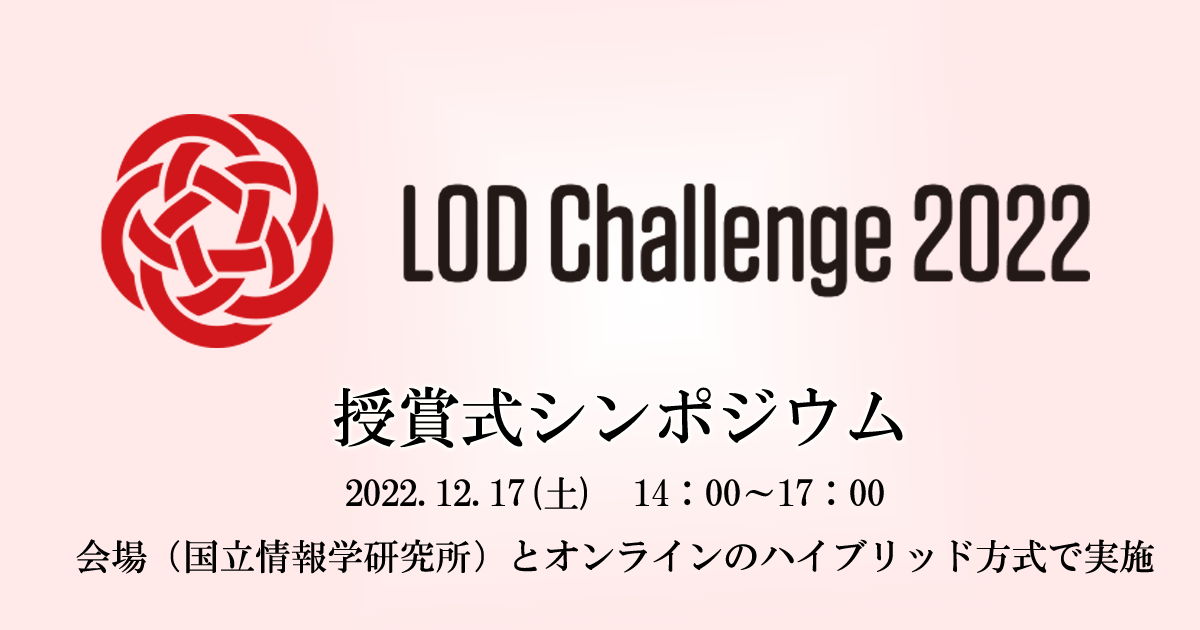
<style>
.page{position:relative;width:1200px;height:630px;background:#ffe9e9}
.page>*{position:absolute;margin:0}
.t1{font:64px "HGMinchoB";color:#000000}
.t2{font:36px "HGMinchoB";color:#000000}
</style>
<div class="page">
<p class="t1" style="left:333px;top:386px;width:570px;height:62px">授賞式シンポジウム</p>
<p class="t2" style="left:76px;top:476px;width:1078px;height:98px;text-align:center">2022.12.17(土)　14：00～17：00<br>会場（国立情報学研究所）とオンラインのハイブリッド方式で実施</p>
</div>
